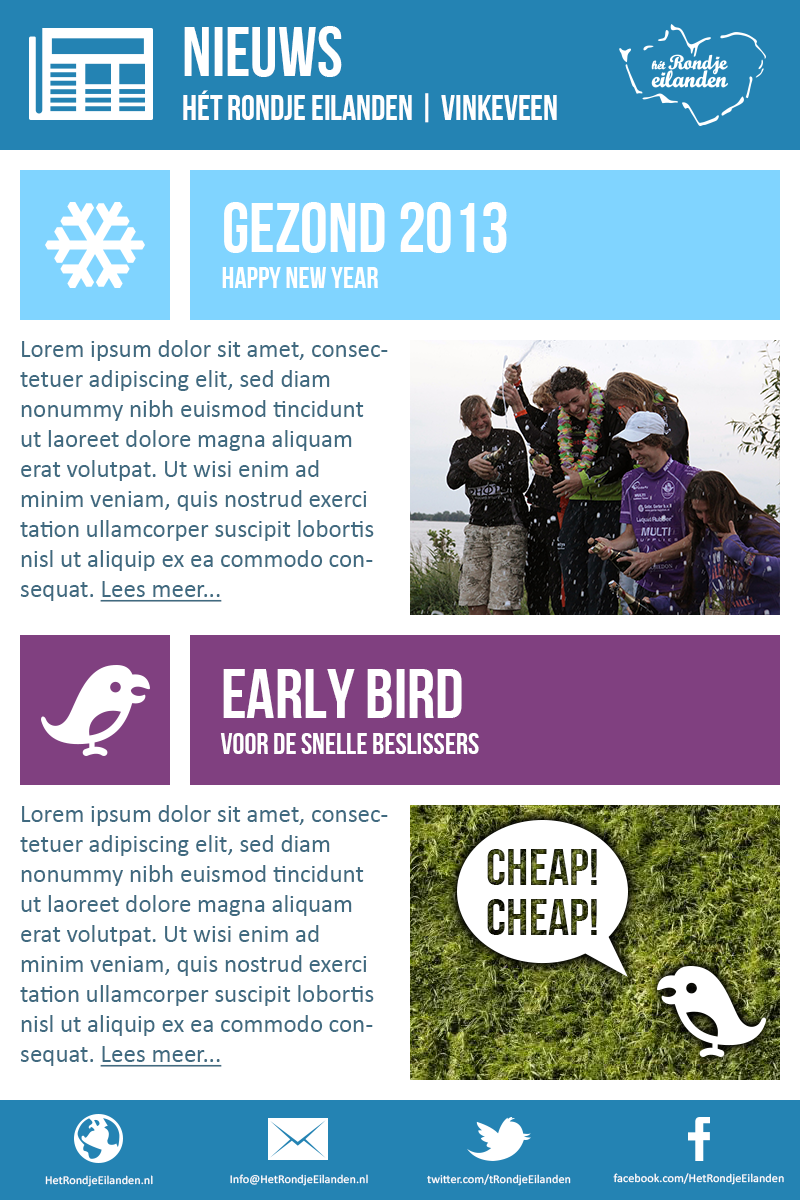
<style>
.page{position:relative;width:800px;height:1200px;background:#ffffff}
.page>*{position:absolute;margin:0}
.t1{font:70px "BebasNeue";color:#ffffff}
.t2{font:35px "BebasNeue";color:#ffffff}
.t3{font:30px "BebasNeue";color:#ffffff}
.t4{font:25px "Calibri";color:#406a80}
.t5{font:25px "Calibri";color:#406a80;text-decoration:underline}
.t6{font:52.5px "BebasNeue"}
.t7{font:11.9px "Calibri";color:#ffffff;scale:1.04 1}
</style>
<div class="page">
<p class="t1" style="left:184px;top:26px;width:158px;height:51px">NIEUWS</p>
<p class="t2" style="left:183px;top:90px;width:374px;height:33px">hét Rondje Eilanden | Vinkeveen</p>
<p class="t3" style="left:222px;top:202px;width:285px;height:86px"><span class="t1">gezond 2013<br></span>HAPPY NEW YEAR</p>
<p class="t4" style="left:20px;top:340px;width:368px;height:262px">Lorem ipsum dolor sit amet, consectetuer adipiscing elit, sed diam nonummy nibh euismod tincidunt ut laoreet dolore magna aliquam erat volutpat. Ut wisi enim ad minim veniam, quis nostrud exerci tation ullamcorper suscipit lobortis nisl ut aliquip ex ea commodo consequat. <span class="t5">Lees meer...</span></p>
<p class="t3" style="left:220px;top:669px;width:259px;height:85px"><span class="t1">early bird<br></span>voor de snelle beslissers</p>
<p class="t4" style="left:20px;top:805px;width:368px;height:262px">Lorem ipsum dolor sit amet, consectetuer adipiscing elit, sed diam nonummy nibh euismod tincidunt ut laoreet dolore magna aliquam erat volutpat. Ut wisi enim ad minim veniam, quis nostrud exerci tation ullamcorper suscipit lobortis nisl ut aliquip ex ea commodo consequat. <span class="t5">Lees meer...</span></p>
<p class="t6" style="left:487px;top:849px;width:110px;height:86px">cheap!<br>cheap!</p>
<p class="t7" style="left:45px;top:1175px;width:108px;height:12px">HetRondjeEilanden.nl</p>
<p class="t7" style="left:230px;top:1174px;width:138px;height:12px">Info@HetRondjeEilanden.nl</p>
<p class="t7" style="left:427px;top:1174px;width:144px;height:12px">twitter.com/tRondjeEilanden</p>
<p class="t7" style="left:613px;top:1173px;width:171px;height:12px">facebook.com/HetRondjeEilanden</p>
</div>
